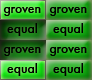
<style>
.page{position:relative;width:92px;height:80px}
.page>*{position:absolute;margin:0}
.t1{font:12px "Futura-Medium";color:#000000}
</style>
<div class="page">
<p class="t1" style="left:3px;top:7px;width:38px;height:9px">groven</p>
<p class="t1" style="left:49px;top:7px;width:38px;height:9px">groven</p>
<p class="t1" style="left:7px;top:23px;width:30px;height:13px">equal</p>
<p class="t1" style="left:53px;top:23px;width:30px;height:13px">equal</p>
<p class="t1" style="left:3px;top:47px;width:38px;height:9px">groven</p>
<p class="t1" style="left:49px;top:47px;width:38px;height:9px">groven</p>
<p class="t1" style="left:7px;top:63px;width:30px;height:13px">equal</p>
<p class="t1" style="left:53px;top:63px;width:30px;height:13px">equal</p>
</div>
